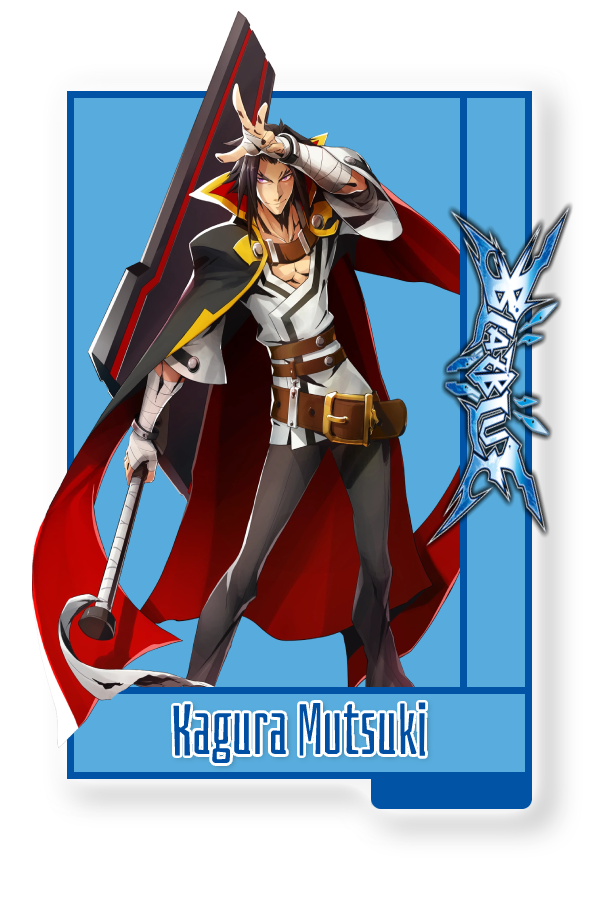
<style>
.page{position:relative;width:600px;height:900px;background:#ffffff}
.page>*{position:absolute;margin:0}
.t1{font:70px "Bahianita-Regular";color:#004fa2}
</style>
<div class="page">
<p class="t1" style="left:173px;top:702px;width:253px;height:62px">Kagura Mutsuki</p>
</div>
